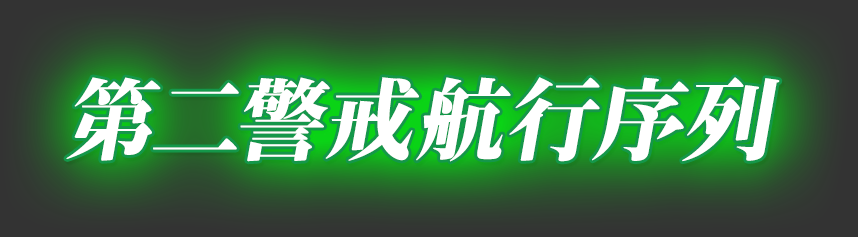
<style>
.page{position:relative;width:858px;height:237px}
.page>*{position:absolute;margin:0}
.t1{font:89px "KochoStd-Heavy";letter-spacing:0.02em;color:#ffffff;font-weight:bold;font-style:italic}
</style>
<div class="page">
<p class="t1" style="left:66px;top:77px;width:714px;height:85px">第二警戒航行序列</p>
</div>
